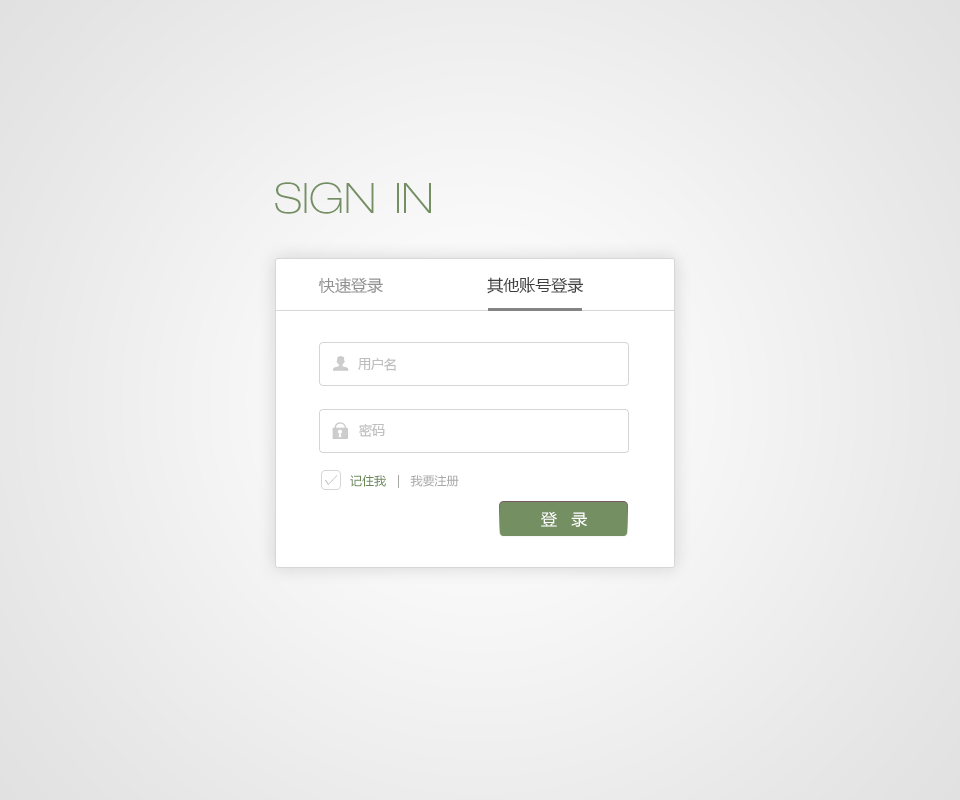
<style>
.page{position:relative;width:960px;height:800px}
.page>*{position:absolute;margin:0}
.t1{font:42px "HelveticaNeueLTPro-ThEx";color:#749063}
.t2{font:16px "MicrosoftYaHei";color:#3f3f3f;text-transform:uppercase}
.t3{font:16px "MicrosoftYaHei";color:#909090;text-transform:uppercase}
.t4{font:13px "MicrosoftYaHei";color:#bebebe}
.t5{font:13px "MicrosoftYaHei";color:#bfbfbf}
.t6{font:13.5px "YouYuan";color:#b0b0b0}
.t7{font:12px "MicrosoftYaHei";color:#a8a8a8}
.t8{font:12px "MicrosoftYaHei";color:#678754}
.t9{font:16px "MicrosoftYaHei";color:#ffffff}
</style>
<div class="page">
<p class="t1" style="left:275px;top:182px;width:156px;height:32px">SIGN  IN</p>
<p class="t2" style="left:319px;top:277px;width:265px;height:17px"><span class="t3">快速登录</span>                      其他账号登录</p>
<p class="t4" style="left:358px;top:358px;width:38px;height:13px">用户名</p>
<p class="t5" style="left:359px;top:424px;width:26px;height:13px">密码</p>
<p class="t6" style="left:324px;top:475px;width:14px;height:10px">√</p>
<p class="t7" style="left:350px;top:475px;width:109px;height:13px"><span class="t8">记住我   </span>|   我要注册</p>
<p class="t9" style="left:541px;top:511px;width:46px;height:16px">登   录</p>
</div>
